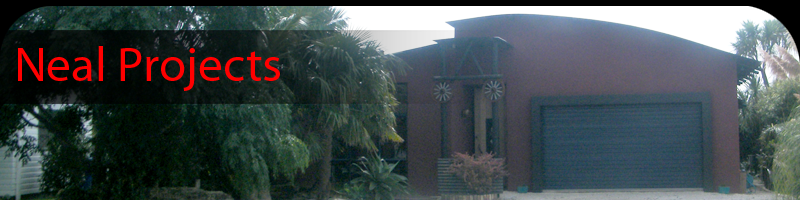
<style>
.page{position:relative;width:800px;height:200px}
.page>*{position:absolute;margin:0}
.t1{font:48px "MyriadPro-Regular";color:#ff0000;scale:1.03 1}
</style>
<div class="page">
<p class="t1" style="left:18px;top:46px;width:262px;height:45px">Neal Projects</p>
</div>
